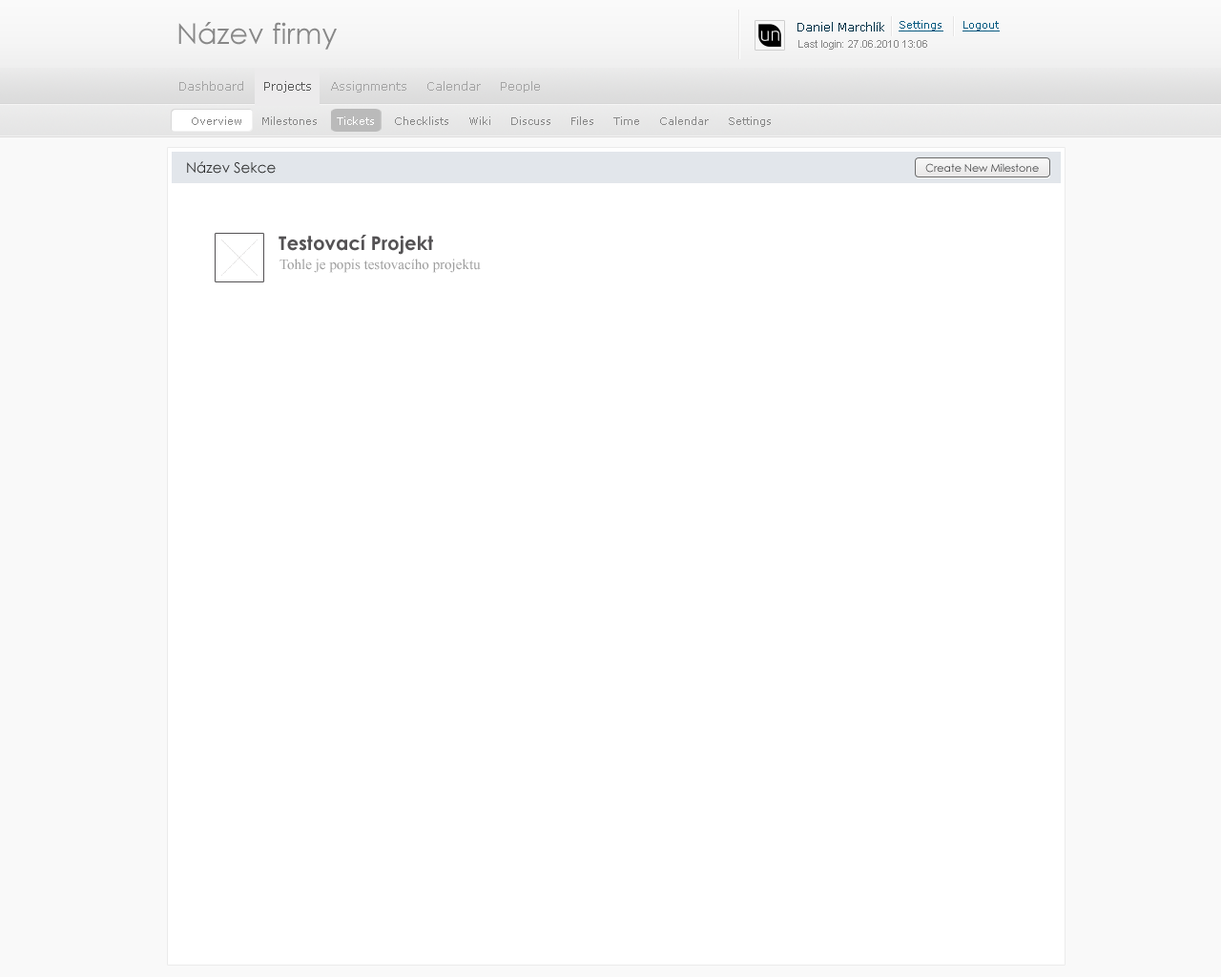
<style>
.page{position:relative;width:1221px;height:977px;background:#ffffff}
.page>*{position:absolute;margin:0}
.t1{font:28.6px "CenturyGothic";color:#888888}
.t2{font:11.4px "Verdana";color:#023147}
.t3{font:10.5px "Verdana";color:#0b5c82;text-decoration:underline}
.t4{font:10.5px "ArialMT";color:#888888}
.t5{font:11.4px "Verdana";color:#a4a4a4}
.t6{font:11.4px "Verdana";color:#595959}
.t7{font:10.5px "Verdana";color:#888888}
.t8{font:10.5px "Verdana";color:#ffffff}
.t9{font:14.3px "CenturyGothic";color:#2f3030}
.t10{font:10.5px "CenturyGothic";color:#474849}
.t11{font:19.1px "CenturyGothic-Bold";color:#545254}
.t12{font:14.3px "TimesNewRomanPSMT";color:#9e9e9e}
</style>
<div class="page">
<p class="t1" style="left:178px;top:22px;width:159px;height:28px">Název firmy</p>
<p class="t2" style="left:797px;top:22px;width:87px;height:9px">Daniel Marchlík</p>
<p class="t3" style="left:898px;top:20px;width:45px;height:11px">Settings</p>
<p class="t3" style="left:962px;top:21px;width:38px;height:10px">Logout</p>
<p class="t4" style="left:798px;top:40px;width:129px;height:10px">Last login: 27.06.2010 13:06</p>
<p class="t5" style="left:179px;top:81px;width:361px;height:12px">Dashboard     <span class="t6">Projects     </span>Assignments     Calendar     People</p>
<p class="t7" style="left:192px;top:116px;width:579px;height:11px">Overview     Milestones     <span class="t8">Tickets     </span>Checklists     Wiki     Discuss     Files     Time     Calendar     Settings</p>
<p class="t9" style="left:187px;top:161px;width:89px;height:13px">Název Sekce</p>
<p class="t10" style="left:925px;top:163px;width:114px;height:10px">Create New Milestone</p>
<p class="t11" style="left:279px;top:235px;width:154px;height:20px">Testovací Projekt</p>
<p class="t12" style="left:279px;top:258px;width:202px;height:15px">Tohle je popis testovacího projektu</p>
</div>
